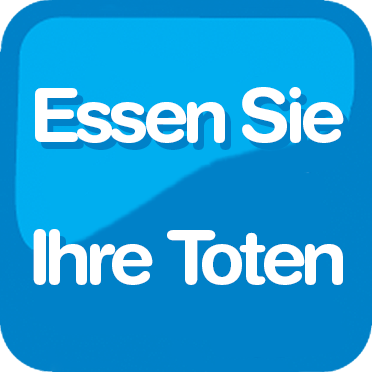
<style>
.page{position:relative;width:372px;height:372px;background:#0081c8}
.page>*{position:absolute;margin:0}
.t1{font:75px/141.7px "HelveticaRounded-Bold";letter-spacing:-0.08em;color:#ffffff}
</style>
<div class="page">
<p class="t1" style="left:33px;top:87px;width:311px;height:198px;text-align:center">Essen Sie<br>Ihre Toten</p>
</div>
